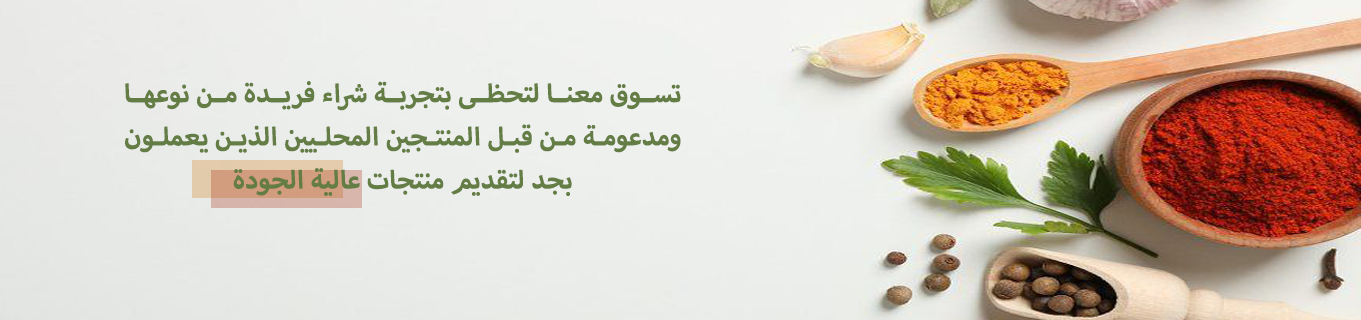
<style>
.page{position:relative;width:1361px;height:320px}
.page>*{position:absolute;margin:0}
.t1{font:36px "MyriadArabic-Bold";color:#647d45}
</style>
<div class="page">
<p class="t1" style="left:125px;top:81px;width:556px;height:115px;text-align:justify">تسوق معنا لتحظى بتجربة شراء فريدة من نوعها ومدعومة من قبل المنتجين المحليين الذين يعملون بجد لتقديم منتجات عالية الجودة</p>
</div>
